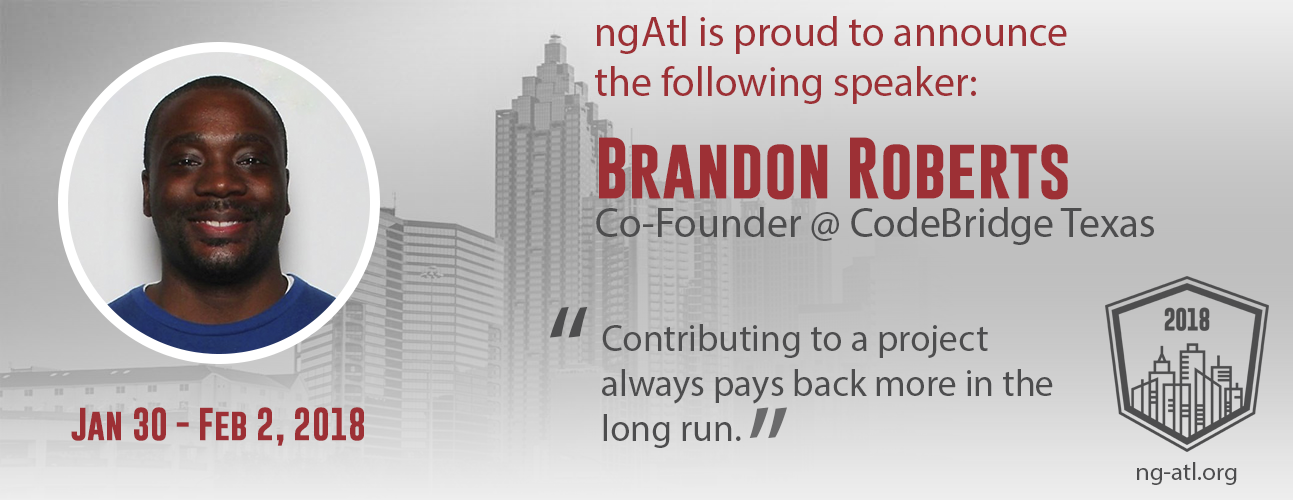
<style>
.page{position:relative;width:1293px;height:500px}
.page>*{position:absolute;margin:0}
.t1{font:41.7px "MyriadPro-Regular";color:#9d3035}
.t2{font:62.5px "GoboldBold";color:#9d3035}
.t3{font:41.7px "MyriadPro-Regular";color:#4d4d4e}
.t4{font:125px "MyriadPro-Regular";color:#4d4d4e}
.t5{font:37.5px "MyriadPro-Regular";color:#4d4d4e}
.t6{font:33.3px "GoboldBold";color:#9d3035}
.t7{font:125px "MyriadPro-Regular";color:#6a6a6b}
.t8{font:25px "MyriadPro-Regular";color:#4d4d4e}
</style>
<div class="page">
<p class="t1" style="left:595px;top:16px;width:472px;height:88px">ngAtl is proud to announce the following speaker:</p>
<p class="t2" style="left:599px;top:137px;width:469px;height:63px">Brandon Roberts</p>
<p class="t3" style="left:596px;top:207px;width:558px;height:38px">Co-Founder @ CodeBridge Texas</p>
<p class="t4" style="left:550px;top:306px;width:38px;height:32px">“</p>
<p class="t5" style="left:602px;top:324px;width:451px;height:124px">Contributing to a project always pays back more in the long run.</p>
<p class="t6" style="left:71px;top:407px;width:293px;height:39px">Jan 30 - Feb 2, 2018</p>
<p class="t7" style="left:749px;top:407px;width:38px;height:32px;rotate:180deg">“</p>
<p class="t8" style="left:1137px;top:462px;width:100px;height:23px">ng-atl.org</p>
</div>
